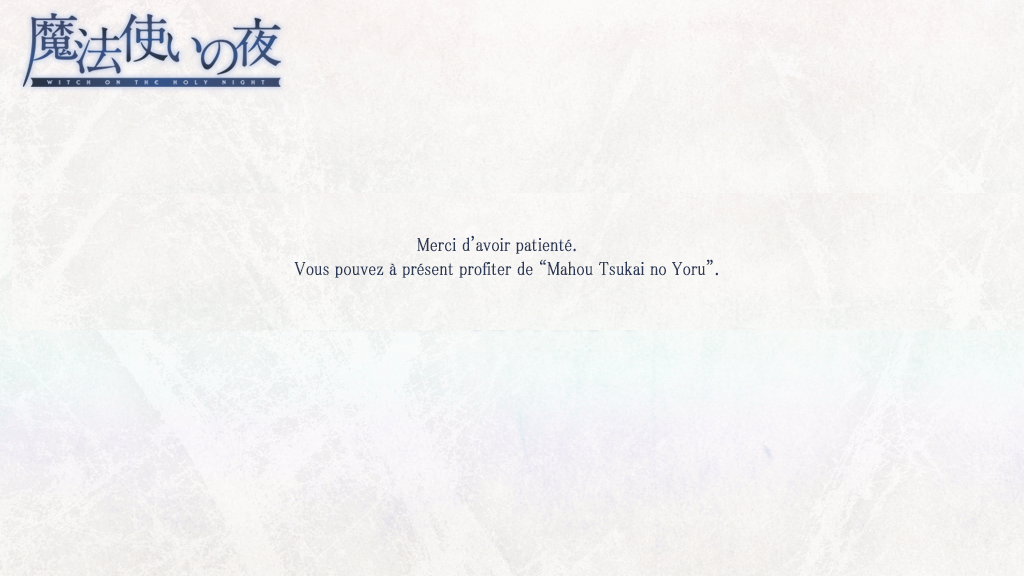
<style>
.page{position:relative;width:1024px;height:576px}
.page>*{position:absolute;margin:0}
.t1{font:19px "MS-PMincho";color:#2b3958;font-weight:bold;scale:0.84 1}
</style>
<div class="page">
<p class="t1" style="left:294px;top:235px;width:424px;height:43px">Merci d'avoir patienté.<br>                                                      Vous pouvez à présent profiter de “Mahou Tsukai no Yoru”.</p>
</div>
